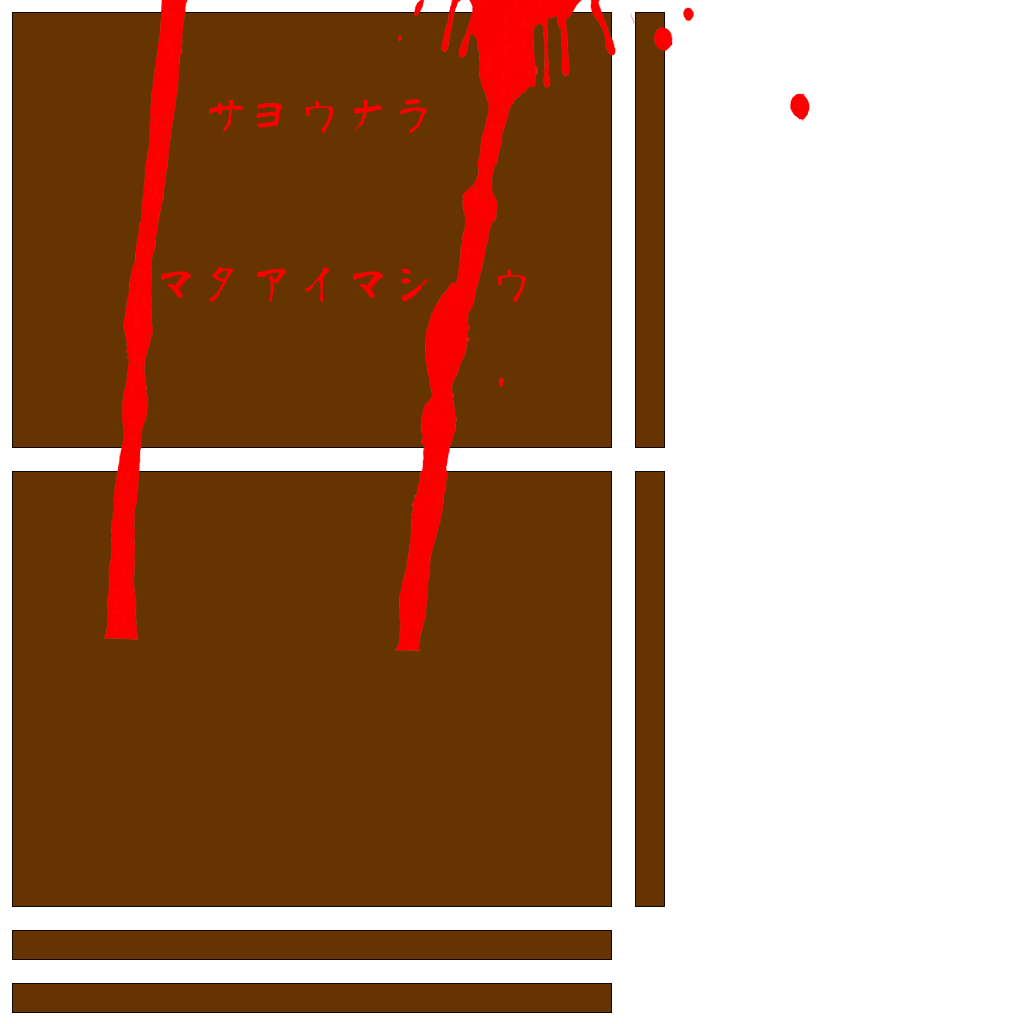
<style>
.page{position:relative;width:1024px;height:1024px;background:#653400}
.page>*{position:absolute;margin:0}
.t1{font:48px "aoyagireisyosimo2";color:#ff0000}
</style>
<div class="page">
<p class="t1" style="left:160px;top:98px;width:366px;height:205px">サヨウナラ<br>　　　　　　　　　　　　　　　マタアイマショウ</p>
</div>
